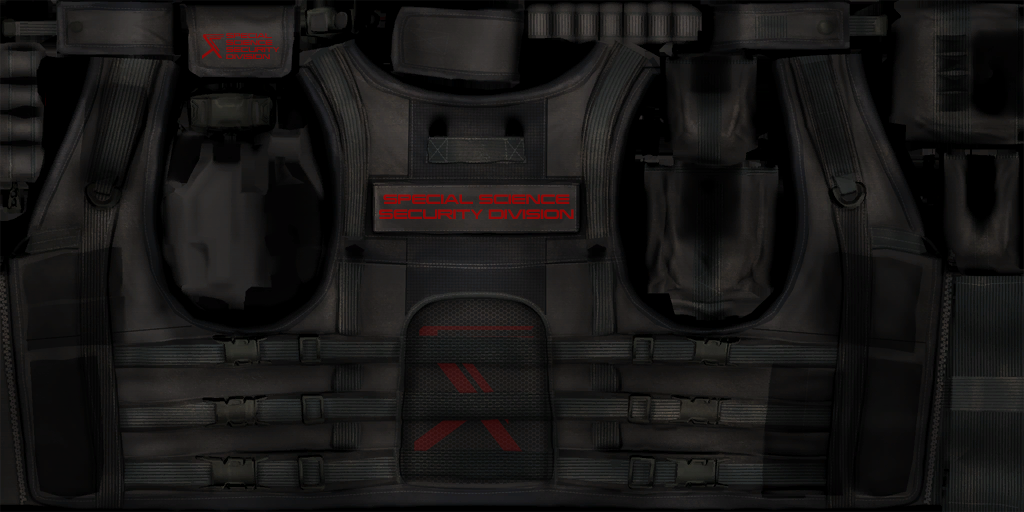
<style>
.page{position:relative;width:1024px;height:512px}
.page>*{position:absolute;margin:0}
.t1{font:6px/7px "MassEffect123";color:#9c0000;font-variant:small-caps}
.t2{font:12px/15px "MassEffect123";letter-spacing:-0.02em;color:#9c0000;font-variant:small-caps}
</style>
<div class="page">
<p class="t1" style="left:226px;top:33px;width:54px;height:26px">SPECIAL<br>SCIENCE <br>SECURITY<br>DIVISION</p>
<p class="t2" style="left:379px;top:194px;width:195px;height:25px;text-align:center">SPECIAL SCIENCE<br>SECURITY DIVISION</p>
</div>
